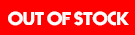
<style>
.page{position:relative;width:135px;height:35px;background:#ff0000}
.page>*{position:absolute;margin:0}
.t1{font:16.7px "Prisma";color:#fcfcfc;scale:1.07 1}
</style>
<div class="page">
<p class="t1" style="left:8px;top:11px;width:121px;height:15px">Out of stock</p>
</div>
